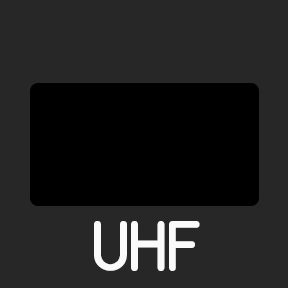
<style>
.page{position:relative;width:288px;height:288px;background:#272727}
.page>*{position:absolute;margin:0}
.t1{font:50px "MS-33558-Regular";letter-spacing:-0.04em;color:#ffffff}
</style>
<div class="page">
<p class="t1" style="left:94px;top:221px;width:106px;height:50px;opacity:0.97">UHF</p>
</div>
